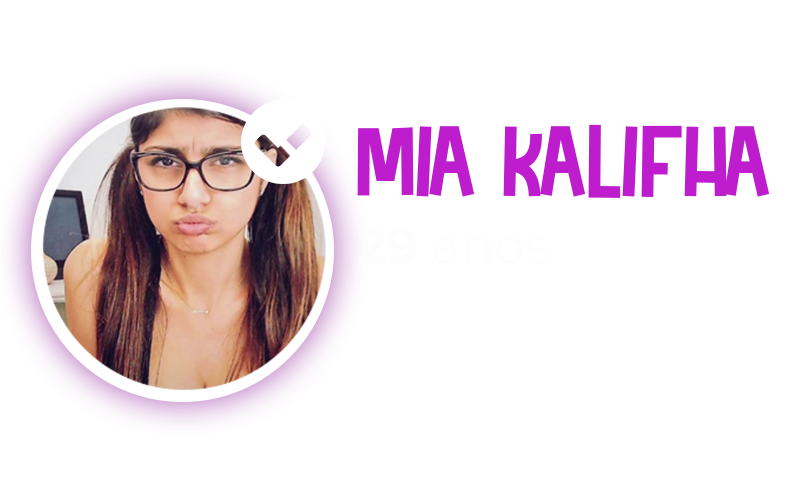
<style>
.page{position:relative;width:800px;height:500px;background:#ffffff}
.page>*{position:absolute;margin:0}
.t1{font:103.9px "RockinsodaRegular";color:#bd1dcc}
</style>
<div class="page">
<p class="t1" style="left:357px;top:124px;width:413px;height:74px">mia kalifha</p>
</div>
